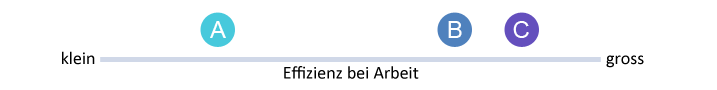
<style>
.page{position:relative;width:717px;height:90px;background:#ffffff}
.page>*{position:absolute;margin:0}
.t1{font:24px "ArialMT";color:#ffffff}
.t2{font:18px "Calibri";color:#000000}
</style>
<div class="page">
<p class="t1" style="left:210px;top:21px;width:16px;height:17px">A</p>
<p class="t1" style="left:448px;top:21px;width:14px;height:17px">B</p>
<p class="t1" style="left:513px;top:21px;width:16px;height:17px">C</p>
<p class="t2" style="left:62px;top:51px;width:33px;height:14px">klein</p>
<p class="t2" style="left:606px;top:55px;width:38px;height:13px">gross</p>
<p class="t2" style="left:284px;top:66px;width:135px;height:13px">Effizienz bei Arbeit</p>
</div>
